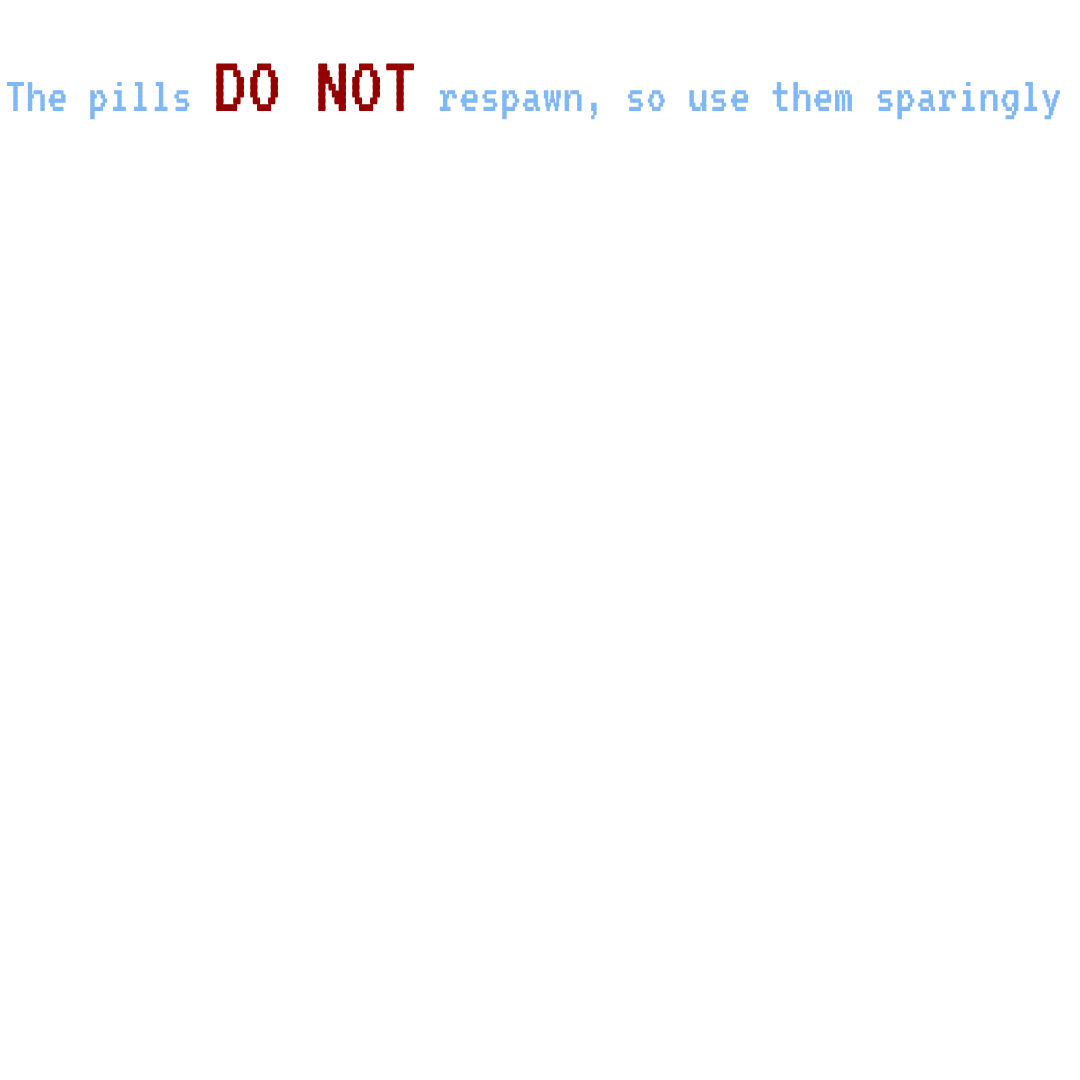
<style>
.page{position:relative;width:1080px;height:1080px;background:#ffffff}
.page>*{position:absolute;margin:0}
.t1{font:52px "VT323-Regular";color:#80b7f7}
.t2{font:85px "VT323-Regular";color:#950000}
</style>
<div class="page">
<p class="t1" style="left:6px;top:63px;width:1055px;height:57px">The pills <span class="t2">DO NOT</span> respawn, so use them sparingly</p>
</div>
